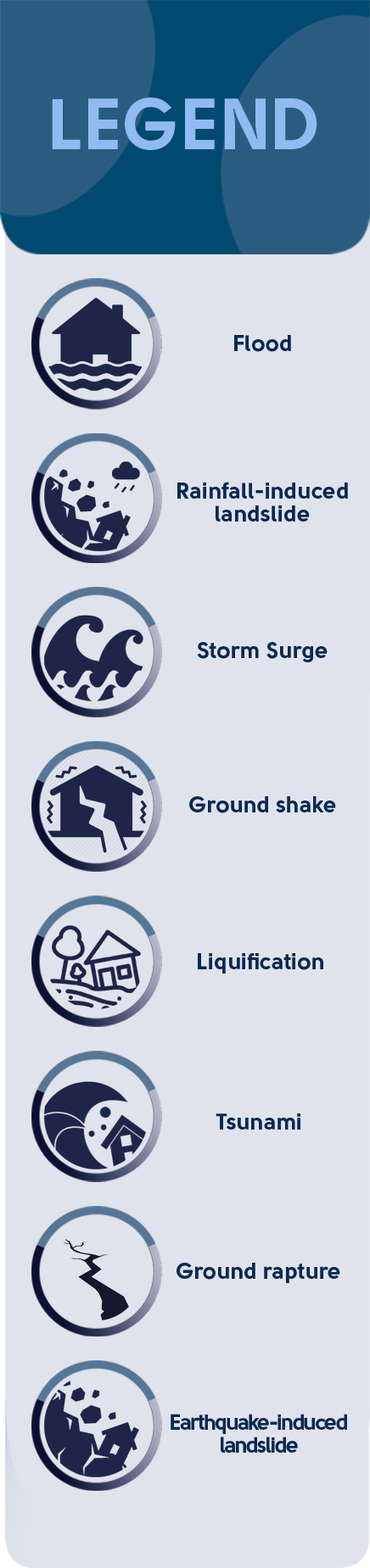
<style>
.page{position:relative;width:370px;height:1568px;background:#e0e3ec}
.page>*{position:absolute;margin:0}
.t1{font:71.9px "Solomon-Sans-Bold";color:#91baf1}
.t2{font:22.9px "Solomon-Sans-Bold";color:#0a2951}
.t3{font:22.9px/22.9px "Solomon-Sans-Bold";color:#0a2951}
.t4{font:22px/23.7px "Solomon-Sans-Bold";letter-spacing:-0.075em;color:#0a2951}
</style>
<div class="page">
<p class="t1" style="left:52px;top:98px;width:265px;height:52px">LEGEND</p>
<p class="t2" style="left:234px;top:335px;width:57px;height:17px">Flood</p>
<p class="t3" style="left:177px;top:482px;width:171px;height:40px;text-align:center">Rainfall-induced<br>landslide</p>
<p class="t2" style="left:197px;top:642px;width:130px;height:20px">Storm Surge</p>
<p class="t2" style="left:189px;top:796px;width:147px;height:17px">Ground shake</p>
<p class="t2" style="left:198px;top:953px;width:125px;height:21px">Liquification</p>
<p class="t2" style="left:215px;top:1113px;width:85px;height:17px">Tsunami</p>
<p class="t2" style="left:176px;top:1263px;width:164px;height:20px">Ground rapture</p>
<p class="t4" style="left:170px;top:1414px;width:177px;height:39px;text-align:center">Earthquake-induced<br>landslide</p>
</div>
